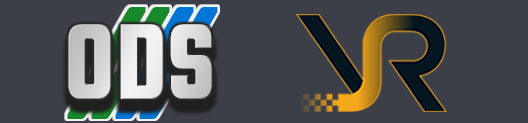
<style>
.page{position:relative;width:528px;height:123px;background:#3d3f48}
.page>*{position:absolute;margin:0}
.t1{font:116.2px "Teko-Bold";letter-spacing:0.01em;font-weight:bold;scale:0.83 1}
</style>
<div class="page">
<p class="t1" style="left:68px;top:24px;width:145px;height:75px">ODS</p>
</div>
